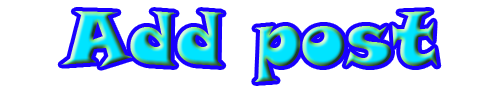
<style>
.page{position:relative;width:504px;height:90px;background:#ffffff}
.page>*{position:absolute;margin:0}
.t1{font:74.3px "SnapITC-Regular"}
</style>
<div class="page">
<p class="t1" style="left:61px;top:11px;width:377px;height:71px">Add post</p>
</div>
